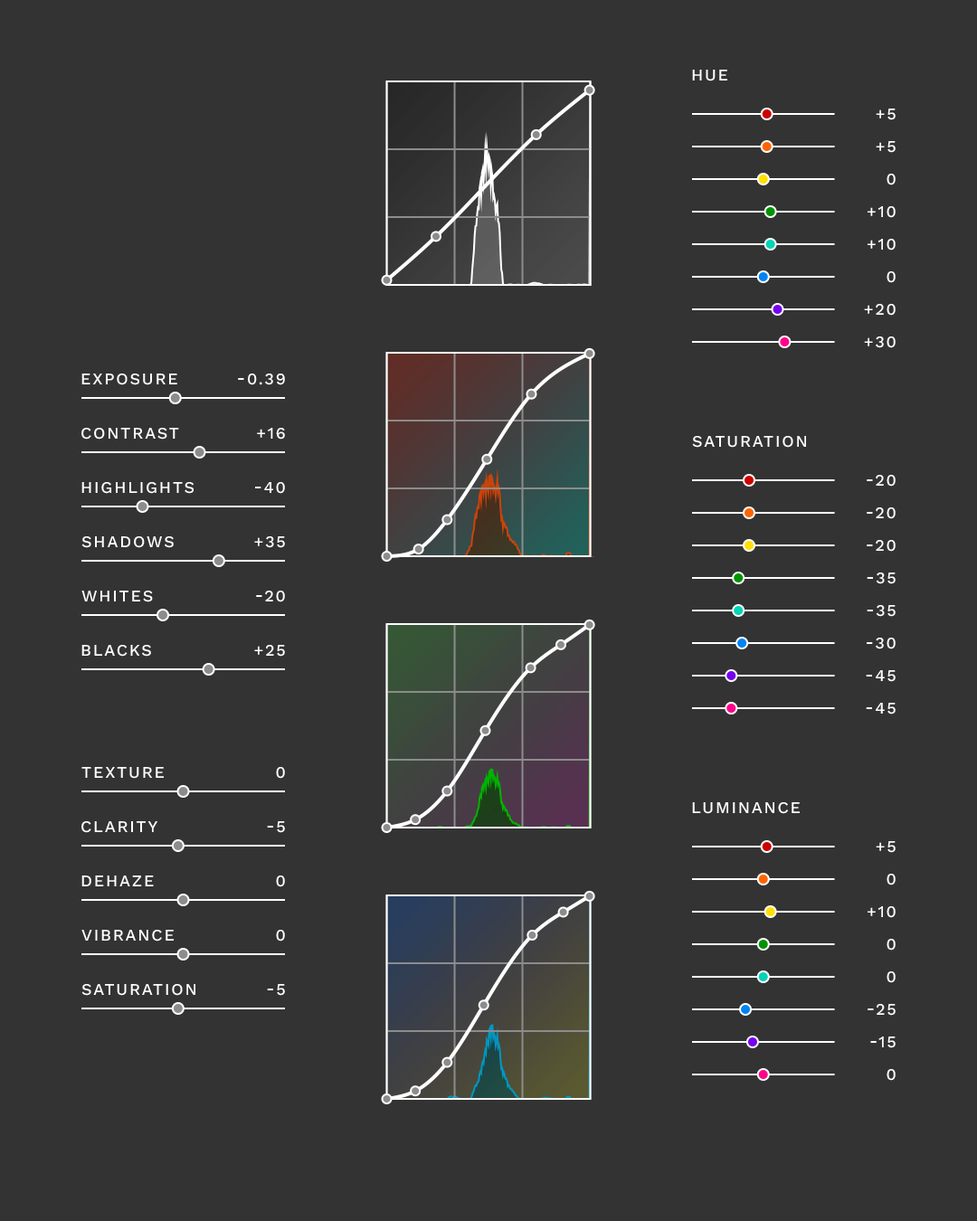
<style>
.page{position:relative;width:977px;height:1221px;background:#333333}
.page>*{position:absolute;margin:0}
.t1{font:16.3px "WorkSansRoman-Medium";letter-spacing:0.1em;color:#ffffff;text-transform:uppercase}
</style>
<div class="page">
<p class="t1" style="left:692px;top:70px;width:35px;height:11px">Hue</p>
<p class="t1" style="left:875px;top:109px;width:20px;height:11px">+5</p>
<p class="t1" style="left:875px;top:141px;width:20px;height:12px">+5</p>
<p class="t1" style="left:886px;top:174px;width:9px;height:11px">0</p>
<p class="t1" style="left:867px;top:206px;width:28px;height:12px">+10</p>
<p class="t1" style="left:867px;top:239px;width:28px;height:12px">+10</p>
<p class="t1" style="left:886px;top:271px;width:9px;height:12px">0</p>
<p class="t1" style="left:864px;top:304px;width:31px;height:12px">+20</p>
<p class="t1" style="left:864px;top:336px;width:31px;height:12px">+30</p>
<p class="t1" style="left:81px;top:373px;width:96px;height:12px">Exposure</p>
<p class="t1" style="left:238px;top:373px;width:47px;height:12px">-0.39</p>
<p class="t1" style="left:81px;top:428px;width:98px;height:12px">Contrast</p>
<p class="t1" style="left:257px;top:428px;width:28px;height:12px">+16</p>
<p class="t1" style="left:692px;top:436px;width:114px;height:12px">Saturation</p>
<p class="t1" style="left:81px;top:482px;width:113px;height:12px">Highlights</p>
<p class="t1" style="left:255px;top:482px;width:30px;height:12px">-40</p>
<p class="t1" style="left:866px;top:475px;width:29px;height:12px">-20</p>
<p class="t1" style="left:866px;top:507px;width:29px;height:12px">-20</p>
<p class="t1" style="left:81px;top:536px;width:93px;height:12px">Shadows</p>
<p class="t1" style="left:254px;top:536px;width:31px;height:12px">+35</p>
<p class="t1" style="left:866px;top:540px;width:29px;height:12px">-20</p>
<p class="t1" style="left:866px;top:572px;width:29px;height:12px">-35</p>
<p class="t1" style="left:81px;top:591px;width:72px;height:11px">Whites</p>
<p class="t1" style="left:256px;top:591px;width:29px;height:11px">-20</p>
<p class="t1" style="left:866px;top:605px;width:29px;height:12px">-35</p>
<p class="t1" style="left:866px;top:638px;width:29px;height:11px">-30</p>
<p class="t1" style="left:81px;top:645px;width:70px;height:12px">Blacks</p>
<p class="t1" style="left:254px;top:645px;width:31px;height:12px">+25</p>
<p class="t1" style="left:865px;top:670px;width:30px;height:12px">-45</p>
<p class="t1" style="left:865px;top:703px;width:30px;height:11px">-45</p>
<p class="t1" style="left:81px;top:767px;width:83px;height:12px">Texture</p>
<p class="t1" style="left:276px;top:767px;width:9px;height:12px">0</p>
<p class="t1" style="left:692px;top:802px;width:107px;height:12px">Luminance</p>
<p class="t1" style="left:81px;top:821px;width:76px;height:12px">Clarity</p>
<p class="t1" style="left:267px;top:821px;width:18px;height:12px">-5</p>
<p class="t1" style="left:875px;top:841px;width:20px;height:12px">+5</p>
<p class="t1" style="left:81px;top:875px;width:73px;height:11px">Dehaze</p>
<p class="t1" style="left:276px;top:875px;width:9px;height:12px">0</p>
<p class="t1" style="left:886px;top:874px;width:9px;height:11px">0</p>
<p class="t1" style="left:867px;top:906px;width:28px;height:12px">+10</p>
<p class="t1" style="left:81px;top:930px;width:93px;height:11px">Vibrance</p>
<p class="t1" style="left:276px;top:930px;width:9px;height:11px">0</p>
<p class="t1" style="left:886px;top:939px;width:9px;height:11px">0</p>
<p class="t1" style="left:886px;top:971px;width:9px;height:12px">0</p>
<p class="t1" style="left:81px;top:984px;width:114px;height:12px">Saturation</p>
<p class="t1" style="left:267px;top:984px;width:18px;height:12px">-5</p>
<p class="t1" style="left:867px;top:1004px;width:28px;height:12px">-25</p>
<p class="t1" style="left:870px;top:1036px;width:25px;height:12px">-15</p>
<p class="t1" style="left:886px;top:1069px;width:9px;height:12px">0</p>
</div>
